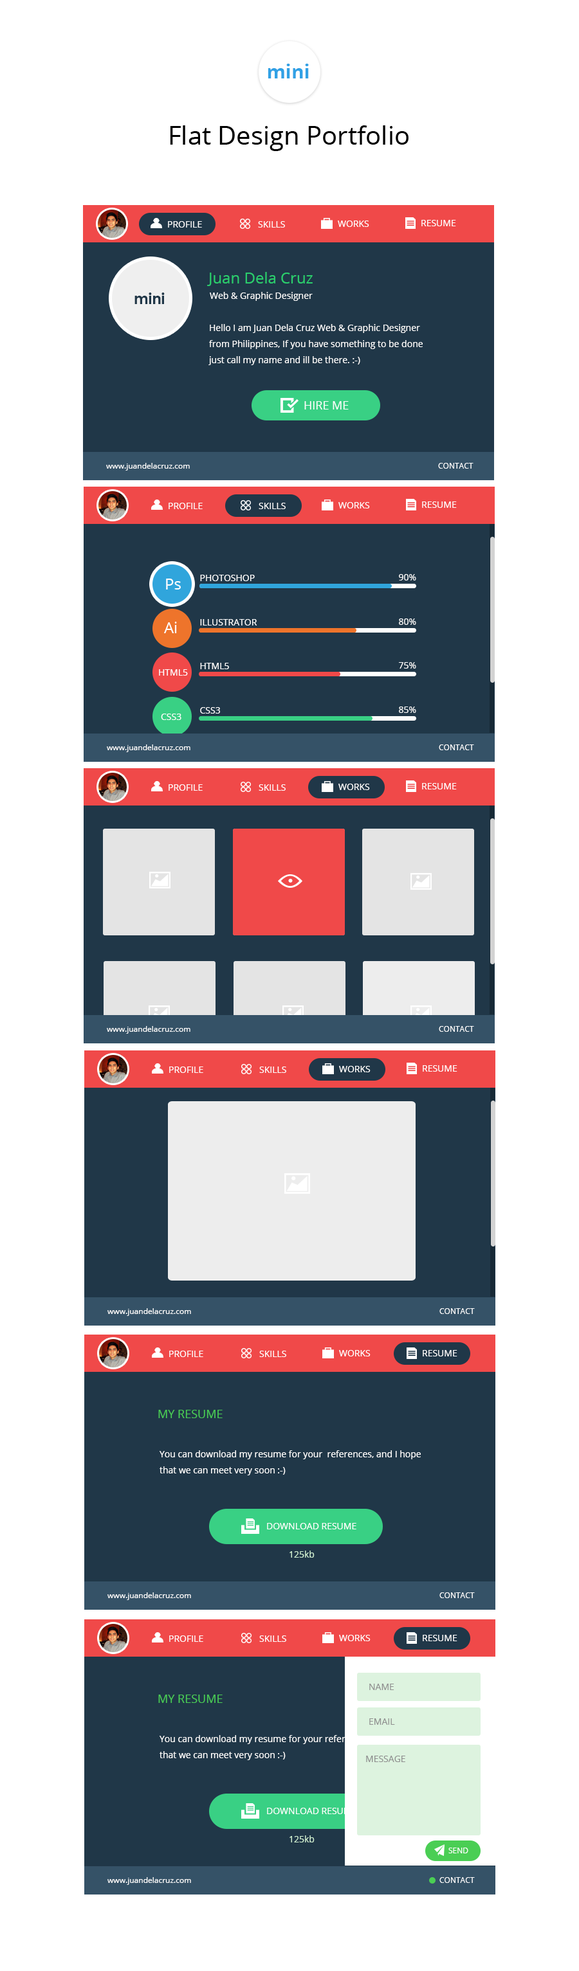
<style>
.page{position:relative;width:579px;height:1971px;background:#ffffff}
.page>*{position:absolute;margin:0}
.t1{font:9px "OpenSans";color:#ffffff}
.t2{font:15.4px "OpenSans";color:#2bce6c}
.t3{font:9px/16.1px "OpenSans";color:#ffffff}
.t4{font:11.6px "OpenSans";color:#ffffff}
.t5{font:7.7px "OpenSans";color:#ffffff}
.t6{font:15.4px "OpenSans";color:#ffffff}
.t7{font:11.6px "OpenSans";color:#4ace54}
.t8{font:9px "OpenSans";color:#d1f1d3}
.t9{font:9px "OpenSans";color:#8f8f8f}
.t10{font:7.7px "OpenSans";color:#fdfdfd}
</style>
<div class="page">
<p class="t1" style="left:168px;top:221px;width:34px;height:7px">PROFILE</p>
<p class="t1" style="left:258px;top:221px;width:27px;height:7px">SKILLS</p>
<p class="t1" style="left:338px;top:221px;width:31px;height:6px">WORKS</p>
<p class="t1" style="left:421px;top:220px;width:35px;height:6px">RESUME</p>
<p class="t2" style="left:207px;top:272px;width:105px;height:14px">Juan Dela Cruz</p>
<p class="t1" style="left:210px;top:292px;width:102px;height:9px">Web &amp; Graphic Designer</p>
<p class="t3" style="left:208px;top:324px;width:214px;height:41px">Hello I am Juan Dela Cruz Web &amp; Graphic Designer<br>from Philippines, If you have something to be done<br>just call my name and ill be there. :-)</p>
<p class="t4" style="left:304px;top:401px;width:44px;height:9px">HIRE ME</p>
<p class="t5" style="left:106px;top:463px;width:84px;height:8px">www.juandelacruz.com</p>
<p class="t5" style="left:438px;top:463px;width:35px;height:6px">CONTACT</p>
<p class="t1" style="left:168px;top:503px;width:35px;height:6px">PROFILE</p>
<p class="t1" style="left:258px;top:503px;width:27px;height:6px">SKILLS</p>
<p class="t1" style="left:338px;top:502px;width:32px;height:7px">WORKS</p>
<p class="t1" style="left:422px;top:501px;width:34px;height:7px">RESUME</p>
<p class="t6" style="left:166px;top:579px;width:15px;height:11px">Ps</p>
<p class="t1" style="left:200px;top:575px;width:55px;height:6px">PHOTOSHOP</p>
<p class="t1" style="left:399px;top:574px;width:17px;height:6px">90%</p>
<p class="t6" style="left:164px;top:622px;width:13px;height:11px">Ai</p>
<p class="t1" style="left:200px;top:619px;width:57px;height:7px">ILLUSTRATOR</p>
<p class="t1" style="left:399px;top:618px;width:17px;height:7px">80%</p>
<p class="t1" style="left:200px;top:663px;width:29px;height:6px">HTML5</p>
<p class="t1" style="left:399px;top:662px;width:17px;height:7px">75%</p>
<p class="t1" style="left:159px;top:669px;width:29px;height:7px">HTML5</p>
<p class="t1" style="left:161px;top:714px;width:20px;height:6px">CSS3</p>
<p class="t1" style="left:200px;top:707px;width:20px;height:7px">CSS3</p>
<p class="t1" style="left:399px;top:706px;width:17px;height:7px">85%</p>
<p class="t5" style="left:107px;top:744px;width:83px;height:8px">www.juandelacruz.com</p>
<p class="t5" style="left:438px;top:744px;width:36px;height:6px">CONTACT</p>
<p class="t1" style="left:168px;top:784px;width:35px;height:7px">PROFILE</p>
<p class="t1" style="left:258px;top:784px;width:27px;height:7px">SKILLS</p>
<p class="t1" style="left:338px;top:784px;width:32px;height:6px">WORKS</p>
<p class="t1" style="left:422px;top:783px;width:34px;height:6px">RESUME</p>
<p class="t5" style="left:107px;top:1026px;width:83px;height:8px">www.juandelacruz.com</p>
<p class="t5" style="left:438px;top:1026px;width:36px;height:6px">CONTACT</p>
<p class="t1" style="left:169px;top:1066px;width:34px;height:7px">PROFILE</p>
<p class="t1" style="left:259px;top:1066px;width:27px;height:7px">SKILLS</p>
<p class="t1" style="left:339px;top:1066px;width:31px;height:6px">WORKS</p>
<p class="t1" style="left:422px;top:1065px;width:35px;height:7px">RESUME</p>
<p class="t5" style="left:107px;top:1308px;width:84px;height:8px">www.juandelacruz.com</p>
<p class="t5" style="left:439px;top:1308px;width:35px;height:6px">CONTACT</p>
<p class="t1" style="left:339px;top:1350px;width:31px;height:6px">WORKS</p>
<p class="t1" style="left:422px;top:1350px;width:35px;height:6px">RESUME</p>
<p class="t1" style="left:169px;top:1351px;width:34px;height:6px">PROFILE</p>
<p class="t1" style="left:259px;top:1351px;width:27px;height:6px">SKILLS</p>
<p class="t7" style="left:158px;top:1410px;width:64px;height:8px">MY RESUME</p>
<p class="t3" style="left:159px;top:1450px;width:261px;height:25px">You can download my resume for your  references, and I hope <br>that we can meet very soon :-)</p>
<p class="t1" style="left:267px;top:1523px;width:89px;height:6px">DOWNLOAD RESUME</p>
<p class="t8" style="left:289px;top:1551px;width:25px;height:7px">125kb</p>
<p class="t5" style="left:107px;top:1592px;width:84px;height:8px">www.juandelacruz.com</p>
<p class="t5" style="left:439px;top:1592px;width:35px;height:6px">CONTACT</p>
<p class="t1" style="left:169px;top:1635px;width:34px;height:7px">PROFILE</p>
<p class="t1" style="left:259px;top:1635px;width:27px;height:7px">SKILLS</p>
<p class="t1" style="left:339px;top:1635px;width:31px;height:6px">WORKS</p>
<p class="t1" style="left:422px;top:1635px;width:35px;height:6px">RESUME</p>
<p class="t9" style="left:369px;top:1684px;width:25px;height:6px">NAME</p>
<p class="t7" style="left:158px;top:1695px;width:64px;height:8px">MY RESUME</p>
<p class="t9" style="left:369px;top:1718px;width:26px;height:7px">EMAIL</p>
<p class="t3" style="left:159px;top:1735px;width:260px;height:25px">You can download my resume for your references, and I hope<br>that we can meet very soon :-)</p>
<p class="t9" style="left:366px;top:1756px;width:39px;height:6px">MESSAGE</p>
<p class="t1" style="left:267px;top:1808px;width:89px;height:6px">DOWNLOAD RESUME</p>
<p class="t8" style="left:289px;top:1835px;width:25px;height:7px">125kb</p>
<p class="t5" style="left:448px;top:1848px;width:20px;height:5px">SEND</p>
<p class="t5" style="left:107px;top:1877px;width:84px;height:8px">www.juandelacruz.com</p>
<p class="t10" style="left:439px;top:1877px;width:35px;height:6px">CONTACT</p>
</div>
